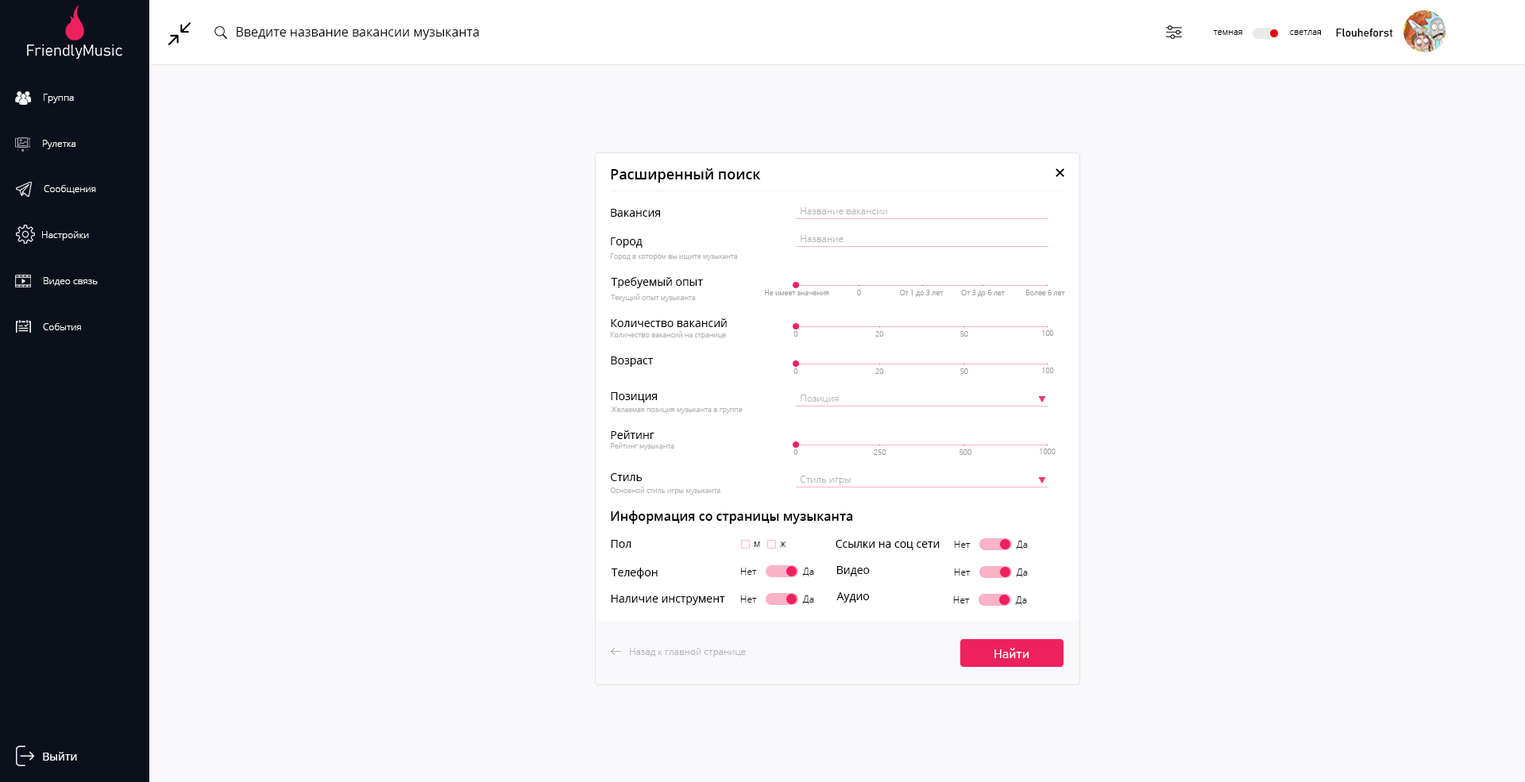
<style>
.page{position:relative;width:1525px;height:782px;background:#f9f9fb}
.page>*{position:absolute;margin:0}
.t1{font:12.7px "OpenSans";color:#000000}
.t2{font:11.1px "Bahnschrift";color:#000000}
.t3{font:8.7px "OpenSans-Light";color:#000000}
.t4{font:9.5px "OpenSans-Light";color:#ffffff}
.t5{font:14.3px "OpenSans-Semibold";color:#000000}
.t6{font:11.1px "OpenSans";color:#000000}
.t7{font:9.5px "OpenSans-Light";color:#afafb7}
.t8{font:7.1px "OpenSans-Light";color:#afafb7}
.t9{font:7.1px "OpenSans-Light";color:#9a9a9a}
.t10{font:12.7px "OpenSans-Semibold";color:#000000}
.t11{font:7.1px "OpenSans-Light";color:#000000}
.t12{font:9.5px "OpenSans-Light";color:#000000}
.t13{font:12.7px "Bahnschrift-SemiLight";color:#ffffff}
.t14{font:11.1px "OpenSans";color:#ffffff}
</style>
<div class="page">
<p class="t1" style="left:237px;top:27px;width:242px;height:13px">Введите название вакансии музыканта</p>
<p class="t2" style="left:1336px;top:28px;width:57px;height:9px">Flouheforst</p>
<p class="t3" style="left:1213px;top:30px;width:29px;height:5px">темная</p>
<p class="t3" style="left:1290px;top:30px;width:31px;height:5px">светлая</p>
<p class="t4" style="left:44px;top:94px;width:30px;height:9px">Группа</p>
<p class="t4" style="left:43px;top:140px;width:32px;height:9px">Рулетка</p>
<p class="t5" style="left:611px;top:168px;width:150px;height:15px">Расширенный поиск</p>
<p class="t4" style="left:44px;top:185px;width:52px;height:9px">Сообщения</p>
<p class="t6" style="left:611px;top:209px;width:49px;height:8px">Вакансия</p>
<p class="t7" style="left:800px;top:207px;width:87px;height:7px">Название вакансии</p>
<p class="t4" style="left:42px;top:231px;width:47px;height:10px">Настройки</p>
<p class="t6" style="left:611px;top:237px;width:31px;height:11px">Город</p>
<p class="t7" style="left:800px;top:235px;width:43px;height:7px">Название</p>
<p class="t8" style="left:611px;top:253px;width:127px;height:7px">Город в котором вы ищите музыканта</p>
<p class="t4" style="left:44px;top:277px;width:54px;height:9px">Видео связь</p>
<p class="t6" style="left:611px;top:277px;width:92px;height:11px">Требуемый опыт</p>
<p class="t8" style="left:611px;top:294px;width:85px;height:8px">Текущий опыт музыканта</p>
<p class="t9" style="left:765px;top:290px;width:64px;height:5px">Не имеет значения</p>
<p class="t9" style="left:857px;top:290px;width:4px;height:5px">0</p>
<p class="t9" style="left:900px;top:290px;width:43px;height:7px">От 1 до 3 лет</p>
<p class="t9" style="left:961px;top:290px;width:43px;height:7px">От 3 до 6 лет</p>
<p class="t9" style="left:1026px;top:290px;width:39px;height:5px">Более 6 лет</p>
<p class="t4" style="left:43px;top:323px;width:38px;height:7px">События</p>
<p class="t6" style="left:611px;top:318px;width:116px;height:9px">Количество вакансий</p>
<p class="t8" style="left:611px;top:331px;width:115px;height:8px">Количество вакансий на странице</p>
<p class="t9" style="left:793px;top:331px;width:4px;height:6px">0</p>
<p class="t9" style="left:875px;top:331px;width:8px;height:6px">20</p>
<p class="t9" style="left:960px;top:331px;width:8px;height:6px">50</p>
<p class="t9" style="left:1042px;top:330px;width:12px;height:6px">100</p>
<p class="t6" style="left:611px;top:357px;width:43px;height:10px">Возраст</p>
<p class="t9" style="left:793px;top:368px;width:4px;height:6px">0</p>
<p class="t9" style="left:875px;top:368px;width:8px;height:6px">20</p>
<p class="t9" style="left:960px;top:368px;width:8px;height:6px">50</p>
<p class="t9" style="left:1042px;top:368px;width:12px;height:5px">100</p>
<p class="t6" style="left:611px;top:392px;width:46px;height:11px">Позиция</p>
<p class="t7" style="left:800px;top:395px;width:39px;height:8px">Позиция</p>
<p class="t8" style="left:611px;top:407px;width:131px;height:7px">Желаемая позиция музыканта в группе</p>
<p class="t6" style="left:611px;top:430px;width:43px;height:9px">Рейтинг</p>
<p class="t8" style="left:611px;top:442px;width:63px;height:8px">Рейтинг музыканта</p>
<p class="t9" style="left:793px;top:449px;width:4px;height:6px">0</p>
<p class="t9" style="left:873px;top:449px;width:13px;height:6px">250</p>
<p class="t9" style="left:959px;top:449px;width:12px;height:6px">500</p>
<p class="t9" style="left:1039px;top:449px;width:16px;height:5px">1000</p>
<p class="t6" style="left:611px;top:473px;width:31px;height:8px">Стиль</p>
<p class="t7" style="left:800px;top:476px;width:50px;height:9px">Стиль игры</p>
<p class="t8" style="left:611px;top:487px;width:109px;height:8px">Основной стиль игры музыканта</p>
<p class="t10" style="left:611px;top:511px;width:242px;height:13px">Информация со страницы музыканта</p>
<p class="t6" style="left:611px;top:540px;width:20px;height:8px">Пол</p>
<p class="t11" style="left:754px;top:542px;width:6px;height:5px">М</p>
<p class="t11" style="left:780px;top:542px;width:6px;height:5px">Ж</p>
<p class="t6" style="left:835px;top:540px;width:104px;height:10px">Ссылки на соц сети</p>
<p class="t12" style="left:954px;top:541px;width:16px;height:7px">Нет</p>
<p class="t12" style="left:1016px;top:541px;width:12px;height:8px">Да</p>
<p class="t6" style="left:611px;top:568px;width:46px;height:11px">Телефон</p>
<p class="t12" style="left:740px;top:568px;width:17px;height:7px">Нет</p>
<p class="t12" style="left:802px;top:568px;width:12px;height:8px">Да</p>
<p class="t6" style="left:837px;top:566px;width:32px;height:10px">Видео</p>
<p class="t12" style="left:954px;top:569px;width:16px;height:7px">Нет</p>
<p class="t12" style="left:1016px;top:569px;width:12px;height:8px">Да</p>
<p class="t6" style="left:836px;top:592px;width:33px;height:11px">Аудио</p>
<p class="t6" style="left:611px;top:595px;width:114px;height:10px">Наличие инструмент</p>
<p class="t12" style="left:740px;top:596px;width:17px;height:7px">Нет</p>
<p class="t12" style="left:802px;top:596px;width:12px;height:8px">Да</p>
<p class="t12" style="left:953px;top:596px;width:17px;height:7px">Нет</p>
<p class="t12" style="left:1015px;top:596px;width:12px;height:9px">Да</p>
<p class="t7" style="left:630px;top:648px;width:116px;height:9px">Назад к главной странице</p>
<p class="t13" style="left:994px;top:648px;width:35px;height:11px">Найти</p>
<p class="t14" style="left:43px;top:752px;width:34px;height:9px">Выйти</p>
</div>
